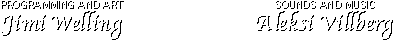
<style>
.page{position:relative;width:393px;height:40px;background:#ffffff}
.page>*{position:absolute;margin:0}
.t1{font:10px "Geneva";color:#ffffff}
.t2{font:10px "Geneva";color:#000000}
.t3{font:22.9px "Apple-Chancery";color:#000000}
</style>
<div class="page">
<p class="t1" style="left:1px;top:0px;width:122px;height:8px">PROGRAMMING AND ART</p>
<p class="t2" style="left:2px;top:1px;width:122px;height:8px">PROGRAMMING AND ART</p>
<p class="t2" style="left:276px;top:1px;width:99px;height:8px">SOUNDS AND MUSIC</p>
<p class="t3" style="left:1px;top:11px;width:121px;height:29px">Jimi Welling</p>
<p class="t3" style="left:257px;top:11px;width:136px;height:29px">Aleksi Villberg</p>
</div>
